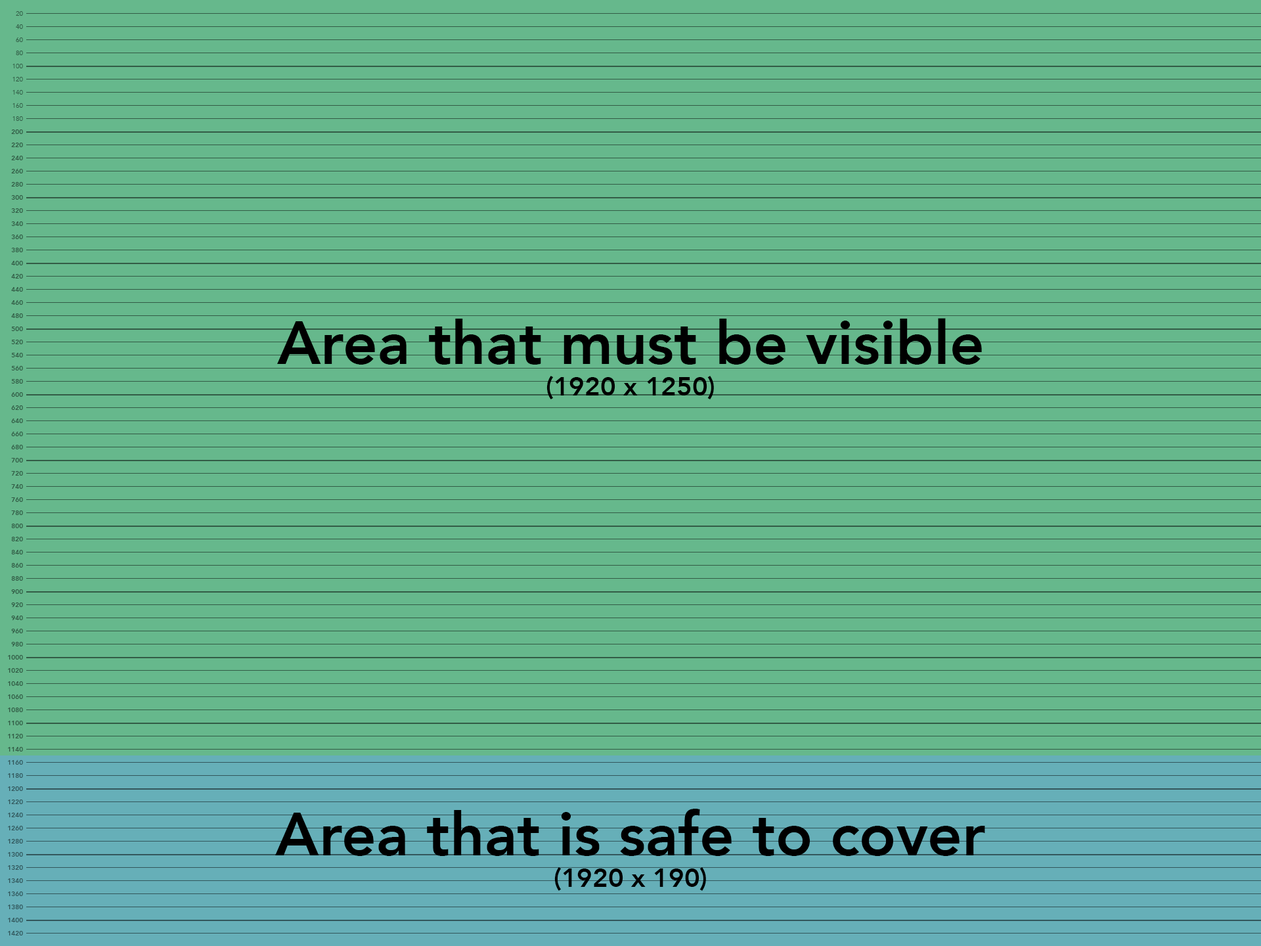
<style>
.page{position:relative;width:1261px;height:946px;background:#66b88c}
.page>*{position:absolute;margin:0}
.t1{font:6.6px/13.1px "Avenir-Heavy";color:#335c46}
.t2{font:6.6px/13.1px "Avenir-Roman";color:#335c46}
.t3{font:6.6px/13.1px "Avenir-Book";color:#335c46}
.t4{font:60.4px "Avenir-Heavy";color:#000000}
.t5{font:26.3px "Avenir-Heavy";color:#000000}
</style>
<div class="page">
<p class="t1" style="left:8px;top:11px;width:15px;height:924px;text-align:right"><span class="t2">20<br>40<br>60<br>80<br></span><span class="t3">100<br>120<br>140<br>160<br>180<br></span>200<br>220<br>240<br>260<br>280<br>300<br>320<br>340<br>360<br>380<br>400<br>420<br>440<br>460<br>480<br>500<br>520<br>540<br>560<br>580<br>600<br>620<br>640<br>660<br>680<br>700<br>720<br>740<br>760<br>780<br>800<br>820<br>840<br>860<br>880<br>900<br>920<br>940<br>960<br>980<br>1000<br>1020<br>1040<br>1060<br>1080<br>1100<br>1120<br>1140<br>1160<br>1180<br>1200<br>1220<br>1240<br>1260<br>1280<br>1300<br>1320<br>1340<br>1360<br>1380<br>1400<br>1420</p>
<p class="t4" style="left:277px;top:318px;width:705px;height:81px;text-align:center">Area that must be visible<br><span class="t5">(1920 x 1250)</span></p>
<p class="t4" style="left:275px;top:808px;width:710px;height:83px;text-align:center">Area that is safe to cover<br><span class="t5">(1920 x 190)</span></p>
</div>
